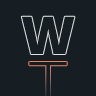
<style>
.page{position:relative;width:96px;height:96px;background:#161d23}
.page>*{position:absolute;margin:0}
.t1{font:52.2px "OpenSans-ExtraBold";color:#161d23}
</style>
<div class="page">
<p class="t1" style="left:21px;top:16px;width:54px;height:38px">W</p>
</div>
